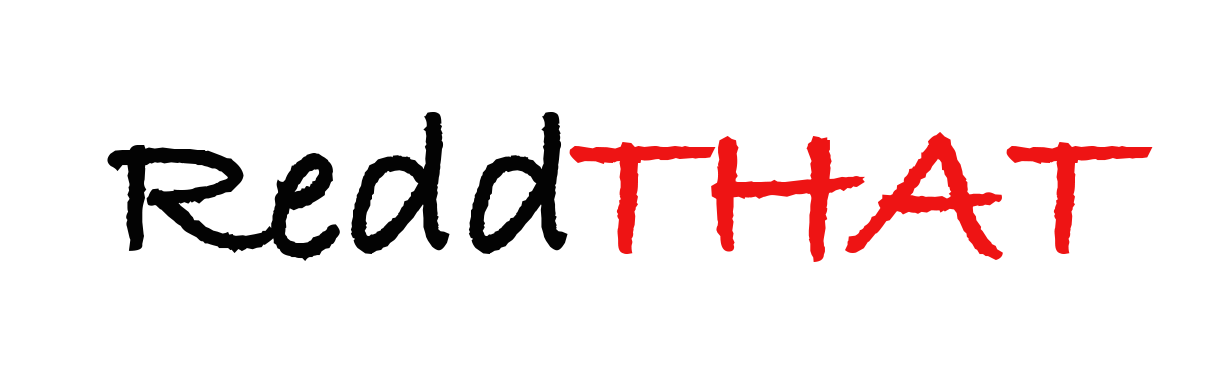
<style>
.page{position:relative;width:1211px;height:392px;background:#ffffff}
.page>*{position:absolute;margin:0}
.t1{font:208.3px "BradleyHandITCTT-Bold";color:#030303}
.t2{font:208.3px "BradleyHandITCTT-Bold";color:#ee1414}
</style>
<div class="page">
<p class="t1" style="left:107px;top:112px;width:461px;height:149px">Redd</p>
<p class="t2" style="left:569px;top:132px;width:584px;height:130px">THAT</p>
</div>
